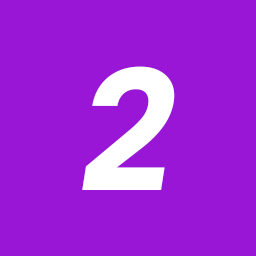
<style>
.page{position:relative;width:256px;height:256px;background:#9916d6}
.page>*{position:absolute;margin:0}
.t1{font:166.7px "JetBrainsMono-ExtraBoldItalic";color:#ffffff}
</style>
<div class="page">
<p class="t1" style="left:82px;top:66px;width:93px;height:124px">2</p>
</div>
